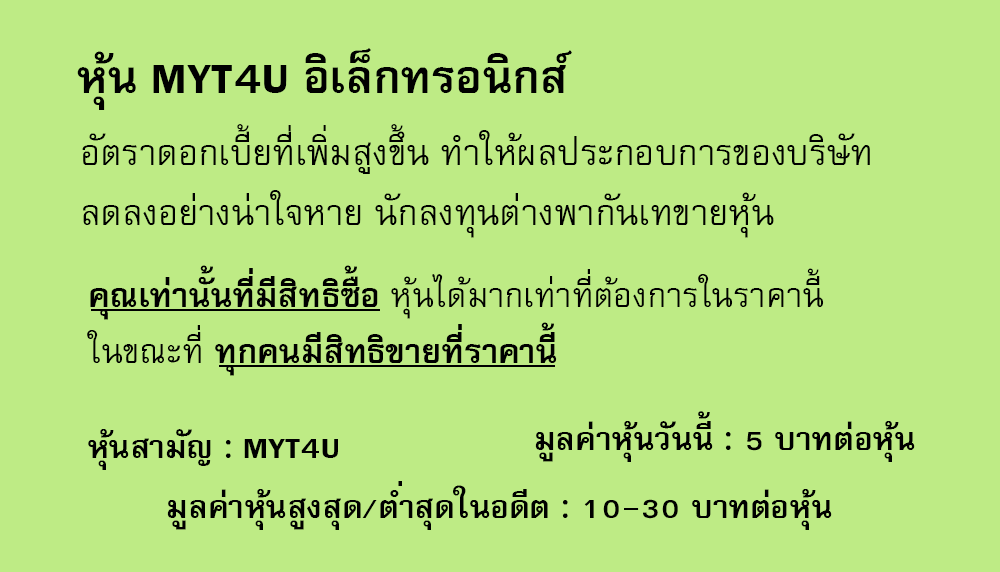
<style>
.page{position:relative;width:1000px;height:572px;background:#beeb85}
.page>*{position:absolute;margin:0}
.t1{font:64px "FreesiaUPCBold";color:#000000}
.t2{font:50px/60px "FreesiaUPC";color:#000000}
.t3{font:47px "FreesiaUPC";color:#000000}
.t4{font:47px "FreesiaUPCBold";color:#000000}
.t5{font:45px "FreesiaUPCBold";color:#000000}
</style>
<div class="page">
<p class="t1" style="left:77px;top:48px;width:495px;height:62px">หุ้น MYT4U อิเล็กทรอนิกส์</p>
<p class="t2" style="left:82px;top:124px;width:788px;height:114px">อัตราดอกเบี้ยที่เพิ่มสูงขึ้น ทำให้ผลประกอบการของบริษัท<br>ลดลงอย่างน่าใจหาย นักลงทุนต่างพากันเทขายหุ้น</p>
<p class="t3" style="left:87px;top:265px;width:737px;height:111px"><span class="t4">คุณเท่านั้นที่มีสิทธิซื้อ </span>หุ้นได้มากเท่าที่ต้องการในราคานี้<br>ในขณะที่<span class="t4"> ทุกคนมีสิทธิขายที่ราคานี้</span></p>
<p class="t5" style="left:535px;top:411px;width:380px;height:51px">มูลค่าหุ้นวันนี้ : 5 บาทต่อหุ้น</p>
<p class="t5" style="left:88px;top:429px;width:250px;height:41px">หุ้นสามัญ : MYT4U</p>
<p class="t5" style="left:167px;top:481px;width:665px;height:49px">มูลค่าหุ้นสูงสุด/ต่ำสุดในอดีต : 10-30 บาทต่อหุ้น</p>
</div>
